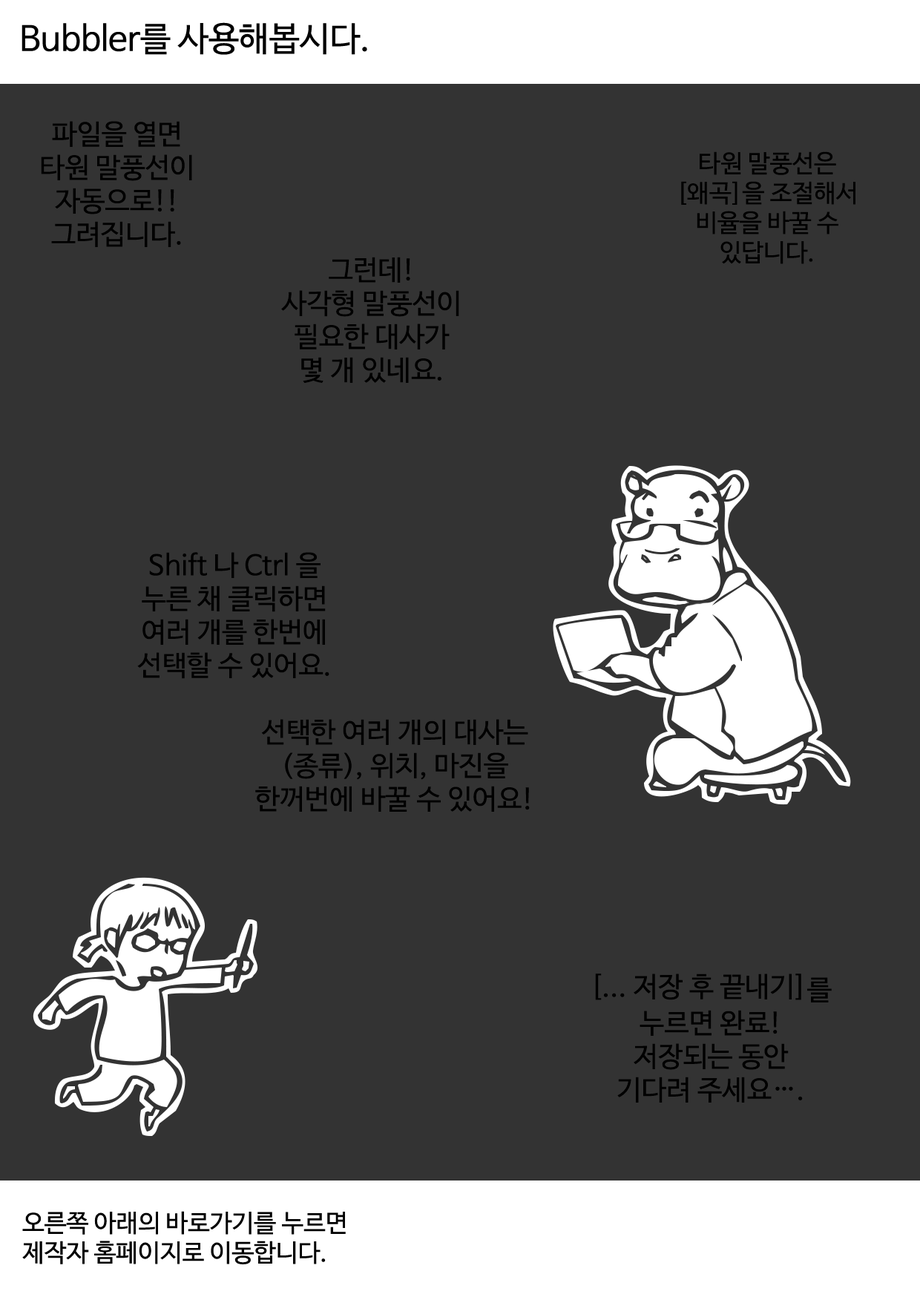
<style>
.page{position:relative;width:920px;height:1297px;background:#333333}
.page>*{position:absolute;margin:0}
.t1{font:27.8px "NanumBarunGothic";color:#000000}
.t2{font:24.7px "NanumBarunGothic";color:#000000}
</style>
<div class="page">
<p class="t1" style="left:41px;top:121px;width:151px;height:126px;text-align:center">파일을 열면<br>타원 말풍선이<br>자동으로!!<br>그려집니다.</p>
<p class="t2" style="left:681px;top:151px;width:174px;height:113px;text-align:center">타원 말풍선은<br>[왜곡]을 조절해서<br>비율을 바꿀 수<br>있답니다.</p>
<p class="t1" style="left:281px;top:257px;width:178px;height:126px;text-align:center">그런데!<br>사각형 말풍선이<br>필요한 대사가<br>몇 개 있네요.</p>
<p class="t1" style="left:137px;top:552px;width:192px;height:127px;text-align:center">Shift 나 Ctrl 을<br>누른 채 클릭하면<br>여러 개를 한번에<br>선택할 수 있어요.</p>
<p class="t1" style="left:255px;top:719px;width:275px;height:92px;text-align:center">선택한 여러 개의 대사는<br>(종류), 위치, 마진을<br>한꺼번에 바꿀 수 있어요!</p>
<p class="t1" style="left:595px;top:973px;width:236px;height:129px;text-align:center">[... 저장 후 끝내기]를<br>누르면 완료!<br>저장되는 동안<br>기다려 주세요….</p>
</div>
